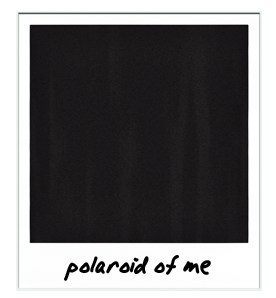
<style>
.page{position:relative;width:276px;height:298px;background:#ffffff}
.page>*{position:absolute;margin:0}
.t1{font:48px "AlphaMackAOE";letter-spacing:-0.01em;color:#000000}
</style>
<div class="page">
<p class="t1" style="left:64px;top:255px;width:147px;height:26px">polaroid of me</p>
</div>
